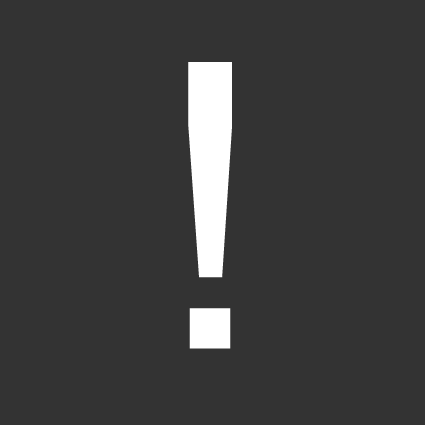
<style>
.page{position:relative;width:425px;height:425px;background:#333333}
.page>*{position:absolute;margin:0}
.t1{font:400px "ArialUnicodeMS";color:#ffffff}
</style>
<div class="page">
<p class="t1" style="left:188px;top:62px;width:44px;height:287px">!</p>
</div>
